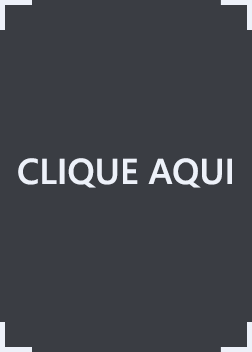
<style>
.page{position:relative;width:252px;height:352px;background:#3a3d43}
.page>*{position:absolute;margin:0}
.t1{font:36px "YuGothicUI-Semibold";color:#edf1f9}
</style>
<div class="page">
<p class="t1" style="left:18px;top:158px;width:214px;height:30px">CLIQUE AQUI</p>
</div>
